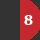
<style>
.page{position:relative;width:40px;height:40px;background:#333333}
.page>*{position:absolute;margin:0}
.t1{font:14px "Tahoma-Bold";color:#ffffff}
</style>
<div class="page">
<p class="t1" style="left:24px;top:15px;width:9px;height:10px">8</p>
</div>
